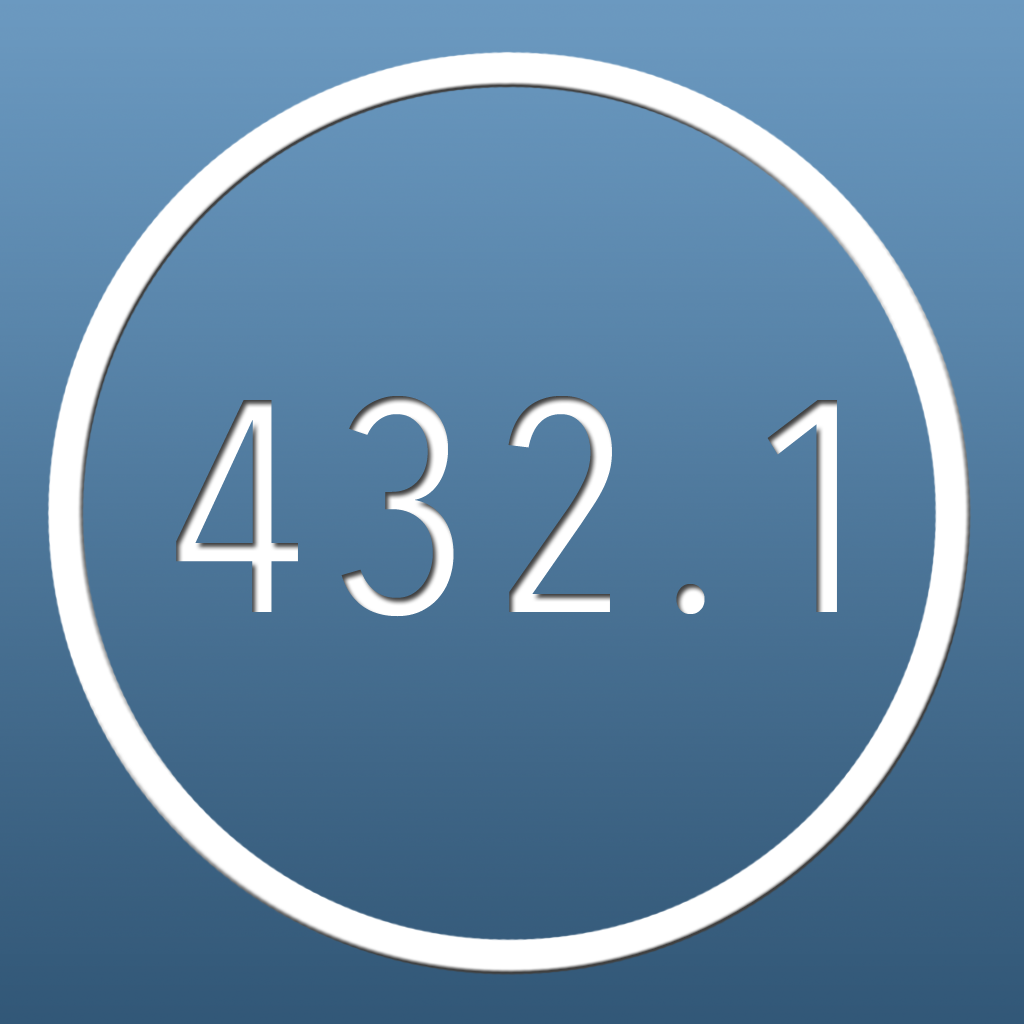
<style>
.page{position:relative;width:1024px;height:1024px}
.page>*{position:absolute;margin:0}
.t1{font:300px "AvenirNextCondensed-Regular";letter-spacing:0.075em;color:#ffffff}
</style>
<div class="page">
<p class="t1" style="left:176px;top:396px;width:661px;height:221px">432.1</p>
</div>
